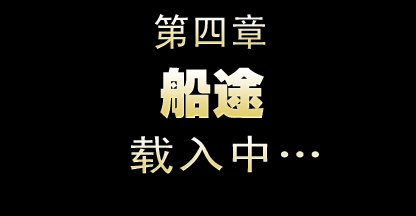
<style>
.page{position:relative;width:416px;height:216px;background:#000000}
.page>*{position:absolute;margin:0}
.t1{font:38px "SimHei";letter-spacing:0.03em;text-transform:uppercase}
.t2{font:53px "HeitiEG-Ultra-GB";text-transform:uppercase}
.t3{font:40.9px "SimHei";letter-spacing:0.03em;scale:1.18 1}
</style>
<div class="page">
<p class="t1" style="left:154px;top:13px;width:112px;height:36px">第四章</p>
<p class="t2" style="left:160px;top:67px;width:104px;height:52px">船途</p>
<p class="t3" style="left:130px;top:135px;width:189px;height:39px">载入中…</p>
</div>
